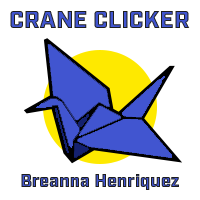
<style>
.page{position:relative;width:200px;height:200px;background:#ffffff}
.page>*{position:absolute;margin:0}
.t1{font:24px "Industry-Ultra"}
.t2{font:18px "Industry-Ultra"}
</style>
<div class="page">
<p class="t1" style="left:10px;top:11px;width:180px;height:17px">CRANE CLICKER</p>
<p class="t2" style="left:21px;top:174px;width:158px;height:16px">Breanna Henriquez</p>
</div>
